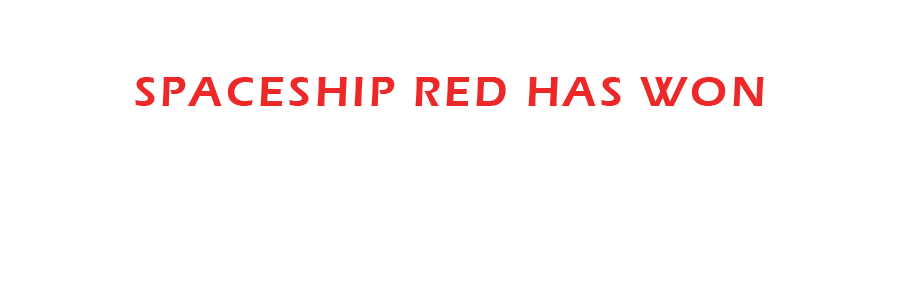
<style>
.page{position:relative;width:900px;height:300px;background:#ffffff}
.page>*{position:absolute;margin:0}
.t1{font:44px "ErasITC-Demi";letter-spacing:0.08em;color:#ed2828;text-transform:uppercase}
</style>
<div class="page">
<p class="t1" style="left:135px;top:77px;width:629px;height:29px">SPACESHIP RED HAs WON</p>
</div>
